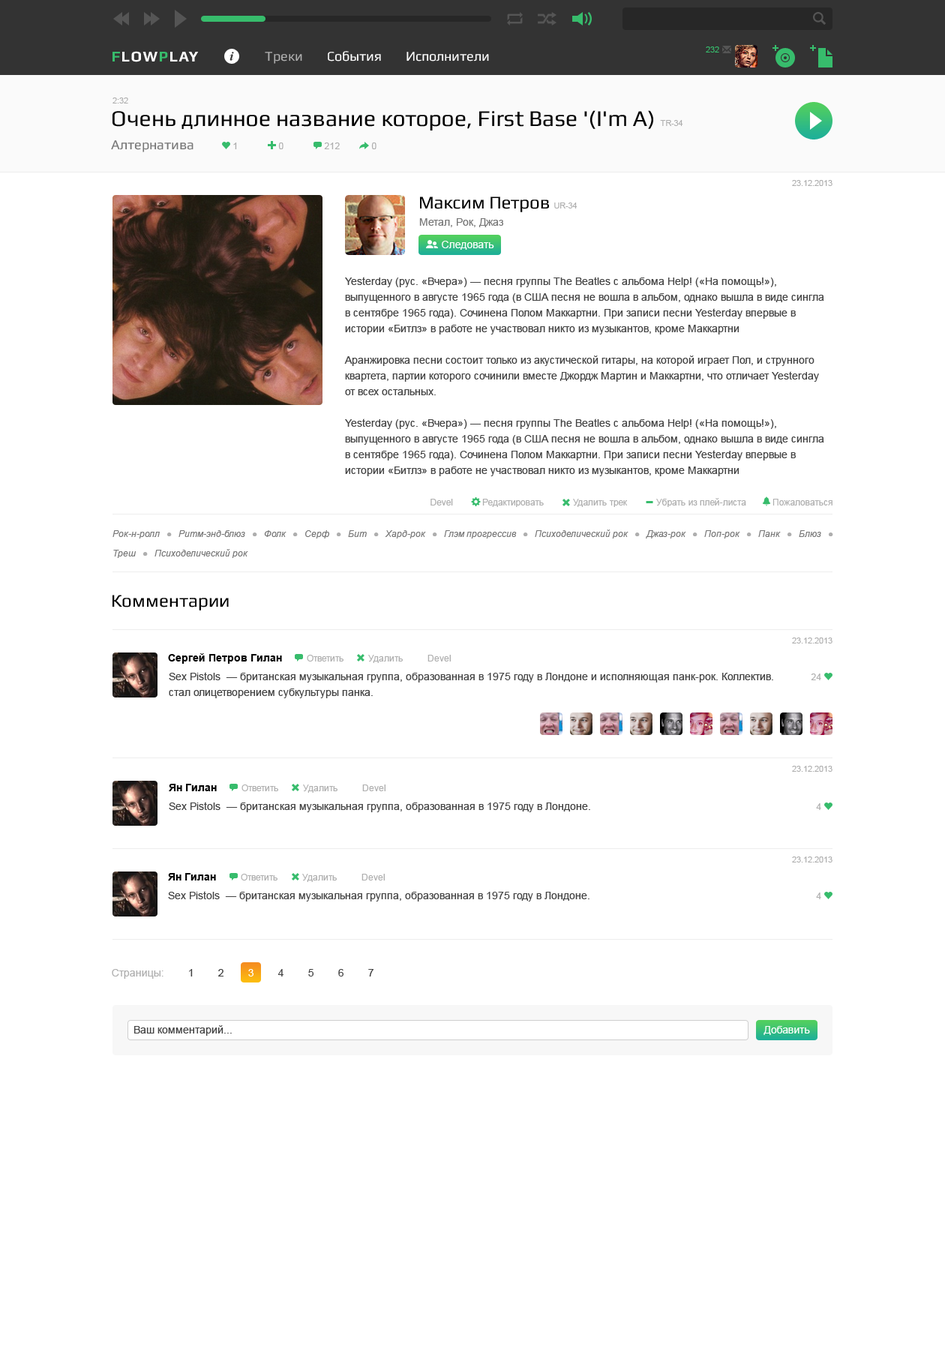
<style>
.page{position:relative;width:945px;height:1359px;background:#ffffff}
.page>*{position:absolute;margin:0}
.t1{font:8.2px "ArialMT";color:#afafaf}
.t2{font:22.5px "Play";color:#000000}
.t3{font:8.3px "ArialMT";color:#afafaf}
.t4{font:13.5px "Play";color:#777777}
.t5{font:9px "ArialMT";color:#afafaf}
.t6{font:18px "Play";color:#000000}
.t7{font:10.5px "ArialMT";color:#777777}
.t8{font:10.5px "ArialMT";color:#ffffff}
.t9{font:10.5px/15.8px "ArialMT";color:#444444}
.t10{font:9px/19.5px "Arial-ItalicMT";color:#777777}
.t11{font:9px/16.5px "Arial-ItalicMT";color:#afafaf}
.t12{font:10.5px "Arial-BoldMT";color:#000000}
.t13{font:10.5px "ArialMT";color:#444444}
.t14{font:10.5px "ArialMT";color:#afafaf}
</style>
<div class="page">
<p class="t1" style="left:112px;top:98px;width:16px;height:6px">2:32</p>
<p class="t2" style="left:112px;top:110px;width:571px;height:20px">Очень длинное название которое, First Base '(I'm A) <span class="t3">TR-34</span></p>
<p class="t4" style="left:111px;top:140px;width:83px;height:12px">Алтернатива</p>
<p class="t5" style="left:233px;top:142px;width:4px;height:7px">1</p>
<p class="t5" style="left:278px;top:142px;width:6px;height:7px">0</p>
<p class="t5" style="left:324px;top:142px;width:16px;height:7px">212</p>
<p class="t5" style="left:371px;top:142px;width:5px;height:7px">0</p>
<p class="t1" style="left:792px;top:180px;width:40px;height:6px">23.12.2013</p>
<p class="t6" style="left:420px;top:196px;width:158px;height:16px">Максим Петров <span class="t3">UR-34</span></p>
<p class="t7" style="left:419px;top:218px;width:84px;height:9px">Метал, Рок, Джаз</p>
<p class="t8" style="left:442px;top:241px;width:52px;height:9px">Следовать</p>
<p class="t9" style="left:344px;top:277px;width:480px;height:199px">Yesterday (рус. «Вчера») — песня группы The Beatles с альбома Help! («На помощь!»), выпущенного в августе 1965 года (в США песня не вошла в альбом, однако вышла в виде сингла в сентябре 1965 года). Сочинена Полом Маккартни. При записи песни Yesterday впервые в истории «Битлз» в работе не участвовал никто из музыкантов, кроме Маккартни<br><br>Аранжировка песни состоит только из акустической гитары, на которой играет Пол, и струнного квартета, партии которого сочинили вместе Джордж Мартин и Маккартни, что отличает Yesterday от всех остальных.<br><br>Yesterday (рус. «Вчера») — песня группы The Beatles с альбома Help! («На помощь!»), выпущенного в августе 1965 года (в США песня не вошла в альбом, однако вышла в виде сингла в сентябре 1965 года). Сочинена Полом Маккартни. При записи песни Yesterday впервые в истории «Битлз» в работе не участвовал никто из музыкантов, кроме Маккартни</p>
<p class="t5" style="left:430px;top:498px;width:402px;height:9px">Devel           Редактировать           Удалить трек           Убрать из плей-листа          Пожаловаться</p>
<p class="t10" style="left:112px;top:530px;width:721px;height:28px">Рок-н-ролл   <span class="t11">●   </span>Ритм-энд-блюз   <span class="t11">●   </span>Фолк   <span class="t11">●   </span>Серф   <span class="t11">●   </span>Бит   <span class="t11">●   </span>Хард-рок   <span class="t11">●   </span>Глэм прогрессив   <span class="t11">●   </span>Психоделический рок   <span class="t11">●   </span>Джаз-рок   <span class="t11">●   </span>Поп-рок   <span class="t11">●   </span>Панк   <span class="t11">●   </span>Блюз   <span class="t11">●   <br></span>Треш   <span class="t11">●   </span>Психоделический рок</p>
<p class="t6" style="left:112px;top:595px;width:117px;height:15px">Комментарии</p>
<p class="t1" style="left:792px;top:638px;width:40px;height:6px">23.12.2013</p>
<p class="t5" style="left:168px;top:653px;width:283px;height:11px"><span class="t12">Сергей Петров Гилан           </span>Ответить           Удалить           Devel</p>
<p class="t9" style="left:169px;top:672px;width:604px;height:26px">Sex Pistols  — британская музыкальная группа, образованная в 1975 году в Лондоне и исполняющая панк-рок. Коллектив. <br>стал олицетворением субкультуры панка.</p>
<p class="t5" style="left:811px;top:674px;width:10px;height:6px">24</p>
<p class="t1" style="left:792px;top:766px;width:40px;height:6px">23.12.2013</p>
<p class="t5" style="left:169px;top:784px;width:217px;height:9px"><span class="t12">Ян Гилан           </span>Ответить           Удалить           Devel</p>
<p class="t13" style="left:169px;top:802px;width:421px;height:10px">Sex Pistols  — британская музыкальная группа, образованная в 1975 году в Лондоне.</p>
<p class="t5" style="left:816px;top:803px;width:5px;height:7px">4</p>
<p class="t1" style="left:792px;top:856px;width:40px;height:6px">23.12.2013</p>
<p class="t5" style="left:168px;top:873px;width:217px;height:9px"><span class="t12">Ян Гилан           </span>Ответить           Удалить           Devel</p>
<p class="t13" style="left:168px;top:891px;width:422px;height:11px">Sex Pistols  — британская музыкальная группа, образованная в 1975 году в Лондоне.</p>
<p class="t5" style="left:816px;top:892px;width:5px;height:7px">4</p>
<p class="t13" style="left:112px;top:969px;width:262px;height:10px"><span class="t14">Страницы:</span>        1        2       <span class="t8"> 3</span>        4        5        6        7</p>
<p class="t13" style="left:134px;top:1025px;width:98px;height:11px">Ваш комментарий...</p>
<p class="t8" style="left:764px;top:1026px;width:46px;height:9px">Добавить</p>
</div>
